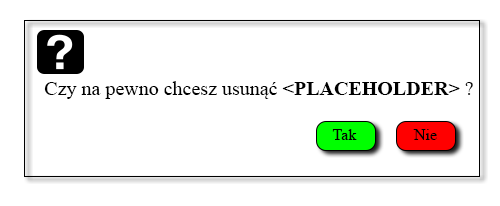
<style>
.page{position:relative;width:500px;height:206px;background:#ffffff}
.page>*{position:absolute;margin:0}
.t1{font:20px "TimesNewRomanPSMT";color:#000000}
.t2{font:20px "TimesNewRomanPS-BoldMT";color:#000000}
.t3{font:16px "TimesNewRomanPSMT";color:#000000}
</style>
<div class="page">
<p class="t1" style="left:44px;top:81px;width:429px;height:18px">Czy na pewno chcesz usunąć <span class="t2">&lt;PLACEHOLDER&gt; </span>?</p>
<p class="t3" style="left:332px;top:129px;width:25px;height:11px">Tak</p>
<p class="t3" style="left:413px;top:129px;width:24px;height:11px">Nie</p>
</div>
